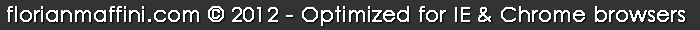
<style>
.page{position:relative;width:700px;height:30px;background:#333333}
.page>*{position:absolute;margin:0}
.t1{font:20px "CenturyGothic";letter-spacing:0.007em;color:#ffffff;font-weight:bold}
</style>
<div class="page">
<p class="t1" style="left:7px;top:6px;width:678px;height:20px">florianmaffini.com © 2012 - Optimized for IE &amp; Chrome browsers</p>
</div>
